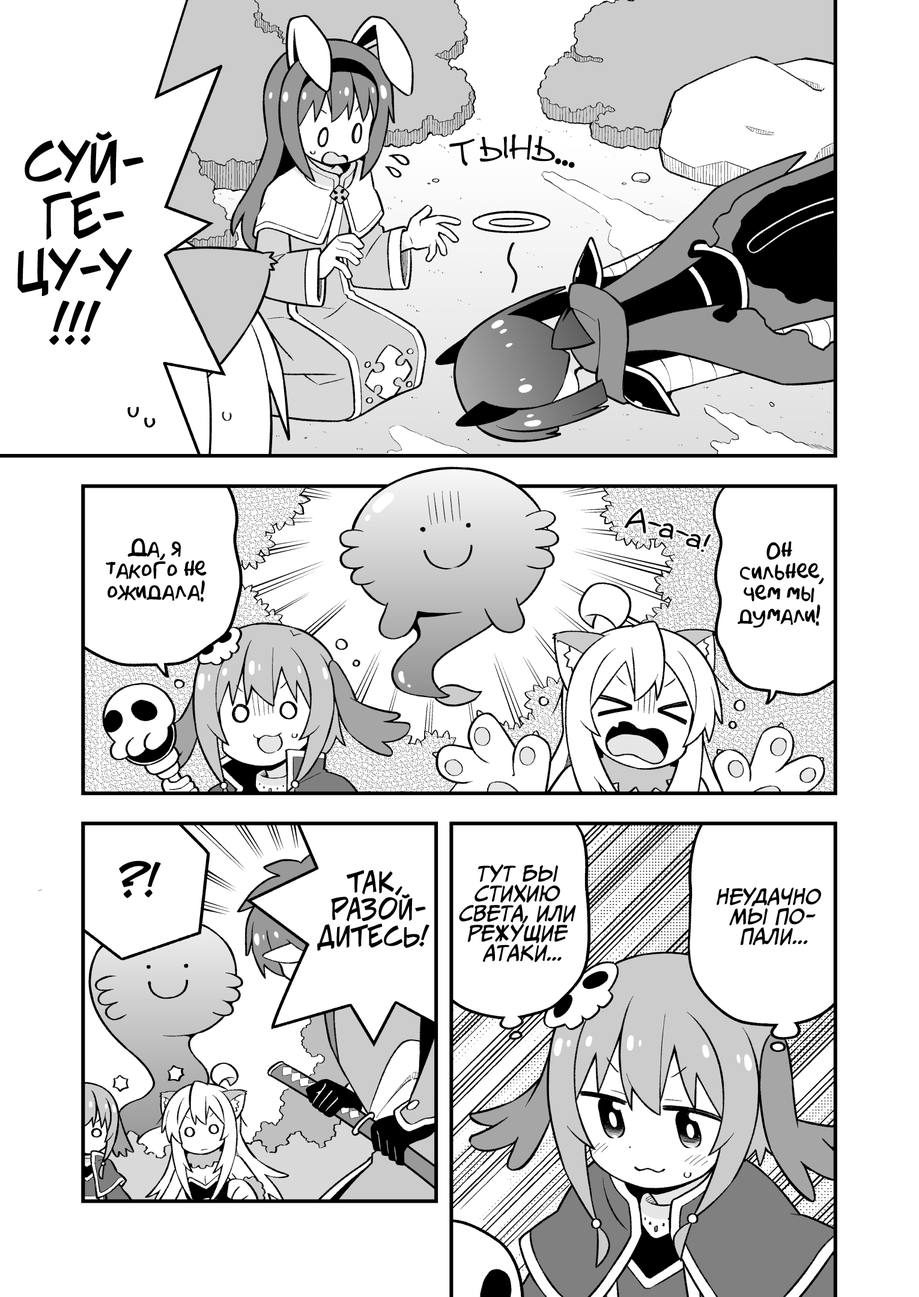
<style>
.page{position:relative;width:919px;height:1297px;background:#ffffff}
.page>*{position:absolute;margin:0}
.t1{font:54.1px "v_CCJeffCampbell";color:#000000;text-transform:uppercase}
.t2{font:36px "DSNote";color:#000000;scale:0.9 1}
.t3{font:28.8px "v_Augie";color:#000000}
.t4{font:21.6px "AkbarPlain";color:#000000}
.t5{font:43.2px "v_CCJeffCampbell";color:#000000;text-transform:uppercase}
.t6{font:19.8px "CCMeanwhile";color:#000000;text-transform:uppercase;font-style:italic}
.t7{font:27px "v_CCJeffCampbell";color:#000000;text-transform:uppercase}
</style>
<div class="page">
<p class="t1" style="left:17px;top:131px;width:127px;height:214px;text-align:center">Суй-<br>ге-<br>цу-у<br>!!!</p>
<p class="t2" style="left:449px;top:134px;width:126px;height:34px">тынь...</p>
<p class="t3" style="left:624px;top:508px;width:87px;height:45px;rotate:17deg">А-а-а!</p>
<p class="t4" style="left:106px;top:538px;width:101px;height:64px;text-align:center">Да, я<br>такого не<br>ожидала!</p>
<p class="t4" style="left:738px;top:541px;width:86px;height:87px;text-align:center">Он<br>сильнее,<br>чем мы<br>думали!</p>
<p class="t5" style="left:119px;top:861px;width:42px;height:38px">?!</p>
<p class="t6" style="left:459px;top:864px;width:117px;height:99px;text-align:center">Тут бы<br>стихию<br>света, или<br>режущие<br>атаки...</p>
<p class="t7" style="left:317px;top:870px;width:112px;height:81px;text-align:center">Так,<br>разой-<br>дитесь!</p>
<p class="t6" style="left:717px;top:887px;width:104px;height:59px;text-align:center">Неудачно<br>мы по-<br>пали...</p>
</div>
